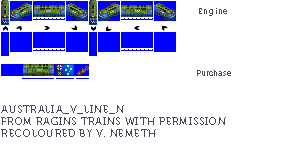
<style>
.page{position:relative;width:300px;height:159px;background:#ffffff}
.page>*{position:absolute;margin:0}
.t1{font:8px "Museo700-Regular";letter-spacing:0.075em;color:#444c5c}
.t2{font:8px "Museo700-Regular";color:#444c5c}
.t3{font:10px "Museo700-Regular";letter-spacing:0.075em;color:#444c5c;text-transform:uppercase}
</style>
<div class="page">
<p class="t1" style="left:199px;top:8px;width:28px;height:8px">Engine</p>
<p class="t2" style="left:197px;top:70px;width:34px;height:6px">Purchase</p>
<p class="t3" style="left:1px;top:105px;width:225px;height:32px">Australia_V_Line_N<br>from ragins trains with permission<br>RECOLOURED BY v. nemeth</p>
</div>
